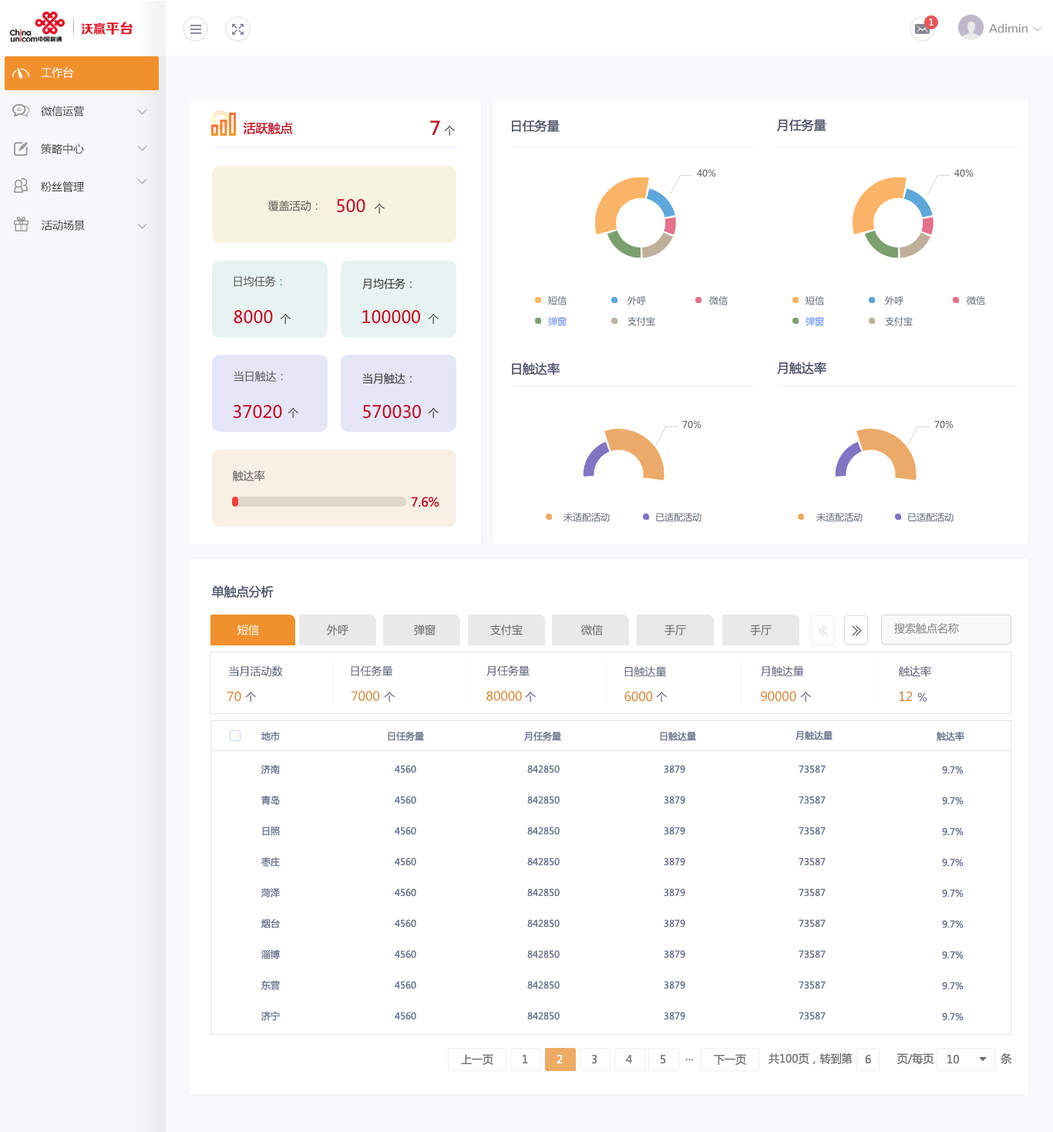
<style>
.page{position:relative;width:1053px;height:1132px;background:#ffffff}
.page>*{position:absolute;margin:0}
.t1{font:12.3px "FZZDHJW--GB1-0";color:#e30b21}
.t2{font:13.9px "FZZDHJW--GB1-0";color:#e30b21}
.t3{font:9.3px "MicrosoftYaHei";color:#ffffff}
.t4{font:10.8px "FZLTZHK--GBK1-0";color:#999999}
.t5{font:10.8px "MicrosoftYaHei";color:#ffffff}
.t6{font:10.8px "MicrosoftYaHei";color:#333333}
.t7{font:12.3px "MicrosoftYaHei";color:#c30621}
.t8{font:18.5px "MicrosoftYaHei";color:#c30621}
.t9{font:12.3px "MicrosoftYaHei";color:#4f556e}
.t10{font:9.3px "MicrosoftYaHei";color:#555555}
.t11{font:10.8px "MicrosoftYaHei";color:#5a5a55}
.t12{font:17px "MicrosoftYaHei";color:#c30621}
.t13{font:10.8px "MicrosoftYaHei";color:#575959}
.t14{font:9.3px "MicrosoftYaHei";color:#5d6876}
.t15{font:9.3px "MicrosoftYaHei";color:#6084fd}
.t16{font:10.8px "MicrosoftYaHei";color:#57575a}
.t17{font:10.8px "MicrosoftYaHei";color:#5a5957}
.t18{font:10.8px "MicrosoftYaHei";color:#666666}
.t19{font:10.8px "MicrosoftYaHei";color:#858585}
.t20{font:10.8px "MicrosoftYaHei";color:#4f556e}
.t21{font:12.3px "MicrosoftYaHei";color:#db7f1e}
.t22{font:9.3px "MicrosoftYaHei";color:#6b7491}
.t23{font:9.3px/30.8px "MicrosoftYaHei";color:#6b7491}
.t24{font:10.8px "MicrosoftYaHei";color:#777777}
</style>
<div class="page">
<p class="t1" style="left:81px;top:22px;width:52px;height:13px">沃赢<span class="t2">平台</span></p>
<p class="t3" style="left:929px;top:19px;width:5px;height:6px">1</p>
<p class="t4" style="left:989px;top:23px;width:39px;height:10px">Adimin</p>
<p class="t5" style="left:41px;top:67px;width:32px;height:11px">工作台</p>
<p class="t6" style="left:41px;top:106px;width:43px;height:10px">微信运营</p>
<p class="t7" style="left:243px;top:122px;width:50px;height:13px">活跃触点</p>
<p class="t8" style="left:430px;top:120px;width:10px;height:15px">7</p>
<p class="t6" style="left:444px;top:126px;width:11px;height:10px">个</p>
<p class="t9" style="left:512px;top:120px;width:48px;height:13px">日任务量</p>
<p class="t9" style="left:777px;top:119px;width:50px;height:13px">月任务量</p>
<p class="t6" style="left:41px;top:143px;width:43px;height:11px">策略中心</p>
<p class="t10" style="left:697px;top:169px;width:19px;height:8px">40%</p>
<p class="t10" style="left:955px;top:169px;width:19px;height:8px">40%</p>
<p class="t6" style="left:41px;top:181px;width:43px;height:11px">粉丝管理</p>
<p class="t11" style="left:268px;top:200px;width:50px;height:11px">覆盖活动：</p>
<p class="t12" style="left:337px;top:199px;width:29px;height:14px">500</p>
<p class="t6" style="left:374px;top:204px;width:11px;height:10px">个</p>
<p class="t6" style="left:42px;top:220px;width:43px;height:11px">活动场景</p>
<p class="t13" style="left:234px;top:276px;width:48px;height:11px">日均任务：</p>
<p class="t6" style="left:362px;top:278px;width:50px;height:11px">月均任务：</p>
<p class="t14" style="left:548px;top:296px;width:19px;height:9px">短信</p>
<p class="t14" style="left:628px;top:296px;width:18px;height:9px">外呼</p>
<p class="t14" style="left:709px;top:296px;width:19px;height:9px">微信</p>
<p class="t14" style="left:806px;top:296px;width:18px;height:9px">短信</p>
<p class="t14" style="left:885px;top:296px;width:19px;height:9px">外呼</p>
<p class="t14" style="left:967px;top:296px;width:19px;height:9px">微信</p>
<p class="t12" style="left:234px;top:310px;width:39px;height:14px">8000</p>
<p class="t6" style="left:280px;top:314px;width:11px;height:10px">个</p>
<p class="t12" style="left:362px;top:310px;width:58px;height:14px">100000</p>
<p class="t6" style="left:428px;top:314px;width:11px;height:10px">个</p>
<p class="t15" style="left:548px;top:317px;width:19px;height:9px">弹窗</p>
<p class="t14" style="left:628px;top:317px;width:27px;height:9px">支付宝</p>
<p class="t15" style="left:806px;top:317px;width:18px;height:9px">弹窗</p>
<p class="t14" style="left:885px;top:317px;width:28px;height:9px">支付宝</p>
<p class="t9" style="left:512px;top:362px;width:48px;height:14px">日触达率</p>
<p class="t9" style="left:777px;top:362px;width:50px;height:13px">月触达率</p>
<p class="t16" style="left:234px;top:371px;width:49px;height:11px">当日触达：</p>
<p class="t6" style="left:362px;top:373px;width:50px;height:11px">当月触达：</p>
<p class="t12" style="left:234px;top:405px;width:48px;height:14px">37020</p>
<p class="t6" style="left:288px;top:408px;width:10px;height:10px">个</p>
<p class="t12" style="left:363px;top:405px;width:58px;height:14px">570030</p>
<p class="t6" style="left:428px;top:408px;width:11px;height:10px">个</p>
<p class="t10" style="left:682px;top:420px;width:20px;height:9px">70%</p>
<p class="t10" style="left:935px;top:420px;width:19px;height:9px">70%</p>
<p class="t17" style="left:232px;top:470px;width:33px;height:11px">触达率</p>
<p class="t7" style="left:411px;top:497px;width:29px;height:10px">7.6%</p>
<p class="t14" style="left:564px;top:513px;width:46px;height:9px">未适配活动</p>
<p class="t14" style="left:656px;top:513px;width:46px;height:9px">已适配活动</p>
<p class="t14" style="left:817px;top:513px;width:46px;height:9px">未适配活动</p>
<p class="t14" style="left:908px;top:513px;width:46px;height:9px">已适配活动</p>
<p class="t9" style="left:211px;top:585px;width:63px;height:13px">单触点分析</p>
<p class="t5" style="left:238px;top:625px;width:21px;height:10px">短信</p>
<p class="t18" style="left:327px;top:625px;width:22px;height:10px">外呼</p>
<p class="t18" style="left:414px;top:625px;width:22px;height:10px">弹窗</p>
<p class="t18" style="left:490px;top:625px;width:33px;height:10px">支付宝</p>
<p class="t18" style="left:581px;top:625px;width:22px;height:10px">微信</p>
<p class="t18" style="left:665px;top:625px;width:21px;height:10px">手厅</p>
<p class="t18" style="left:750px;top:625px;width:22px;height:10px">手厅</p>
<p class="t19" style="left:895px;top:623px;width:64px;height:11px">搜索触点名称</p>
<p class="t20" style="left:229px;top:665px;width:54px;height:12px">当月活动数</p>
<p class="t20" style="left:351px;top:665px;width:42px;height:11px">日任务量</p>
<p class="t20" style="left:487px;top:665px;width:43px;height:11px">月任务量</p>
<p class="t20" style="left:761px;top:665px;width:43px;height:12px">月触达量</p>
<p class="t20" style="left:899px;top:665px;width:33px;height:12px">触达率</p>
<p class="t20" style="left:625px;top:666px;width:42px;height:11px">日触达量</p>
<p class="t21" style="left:227px;top:691px;width:14px;height:11px">70</p>
<p class="t20" style="left:245px;top:692px;width:11px;height:11px">个</p>
<p class="t21" style="left:352px;top:691px;width:27px;height:10px">7000</p>
<p class="t20" style="left:384px;top:692px;width:11px;height:11px">个</p>
<p class="t21" style="left:487px;top:691px;width:35px;height:10px">80000</p>
<p class="t20" style="left:525px;top:692px;width:11px;height:11px">个</p>
<p class="t21" style="left:625px;top:691px;width:28px;height:11px">6000</p>
<p class="t20" style="left:656px;top:692px;width:11px;height:11px">个</p>
<p class="t21" style="left:761px;top:691px;width:36px;height:10px">90000</p>
<p class="t20" style="left:800px;top:692px;width:11px;height:11px">个</p>
<p class="t21" style="left:899px;top:691px;width:13px;height:10px">12</p>
<p class="t20" style="left:918px;top:692px;width:9px;height:10px">%</p>
<p class="t22" style="left:261px;top:731px;width:19px;height:10px">地市</p>
<p class="t22" style="left:388px;top:731px;width:36px;height:10px">日任务量</p>
<p class="t22" style="left:524px;top:731px;width:37px;height:10px">月任务量</p>
<p class="t22" style="left:660px;top:731px;width:36px;height:10px">日触达量</p>
<p class="t22" style="left:796px;top:730px;width:37px;height:10px">月触达量</p>
<p class="t22" style="left:937px;top:731px;width:28px;height:10px">触达率</p>
<p class="t23" style="left:261px;top:764px;width:19px;height:257px">济南<br>青岛<br>日照<br>枣庄<br>菏泽<br>烟台<br>淄博<br>东营<br>济宁</p>
<p class="t23" style="left:395px;top:765px;width:21px;height:255px">4560<br>4560<br>4560<br>4560<br>4560<br>4560<br>4560<br>4560<br>4560</p>
<p class="t23" style="left:527px;top:765px;width:33px;height:255px">842850<br>842850<br>842850<br>842850<br>842850<br>842850<br>842850<br>842850<br>842850</p>
<p class="t23" style="left:664px;top:765px;width:22px;height:255px">3879<br>3879<br>3879<br>3879<br>3879<br>3879<br>3879<br>3879<br>3879</p>
<p class="t23" style="left:799px;top:765px;width:27px;height:255px">73587<br>73587<br>73587<br>73587<br>73587<br>73587<br>73587<br>73587<br>73587</p>
<p class="t23" style="left:942px;top:766px;width:22px;height:255px">9.7%<br>9.7%<br>9.7%<br>9.7%<br>9.7%<br>9.7%<br>9.7%<br>9.7%<br>9.7%</p>
<p class="t24" style="left:461px;top:1054px;width:33px;height:11px">上一页</p>
<p class="t24" style="left:523px;top:1054px;width:5px;height:9px">1</p>
<p class="t5" style="left:557px;top:1054px;width:6px;height:9px">2</p>
<p class="t24" style="left:591px;top:1054px;width:7px;height:10px">3</p>
<p class="t24" style="left:626px;top:1055px;width:6px;height:8px">4</p>
<p class="t24" style="left:661px;top:1055px;width:5px;height:9px">5</p>
<p class="t24" style="left:686px;top:1059px;width:7px;height:2px">...</p>
<p class="t24" style="left:714px;top:1054px;width:32px;height:11px">下一页</p>
<p class="t24" style="left:769px;top:1053px;width:243px;height:11px">共100页，转到第              页/每页                     条</p>
<p class="t24" style="left:865px;top:1054px;width:6px;height:10px">6</p>
<p class="t24" style="left:948px;top:1054px;width:11px;height:10px">10</p>
</div>
